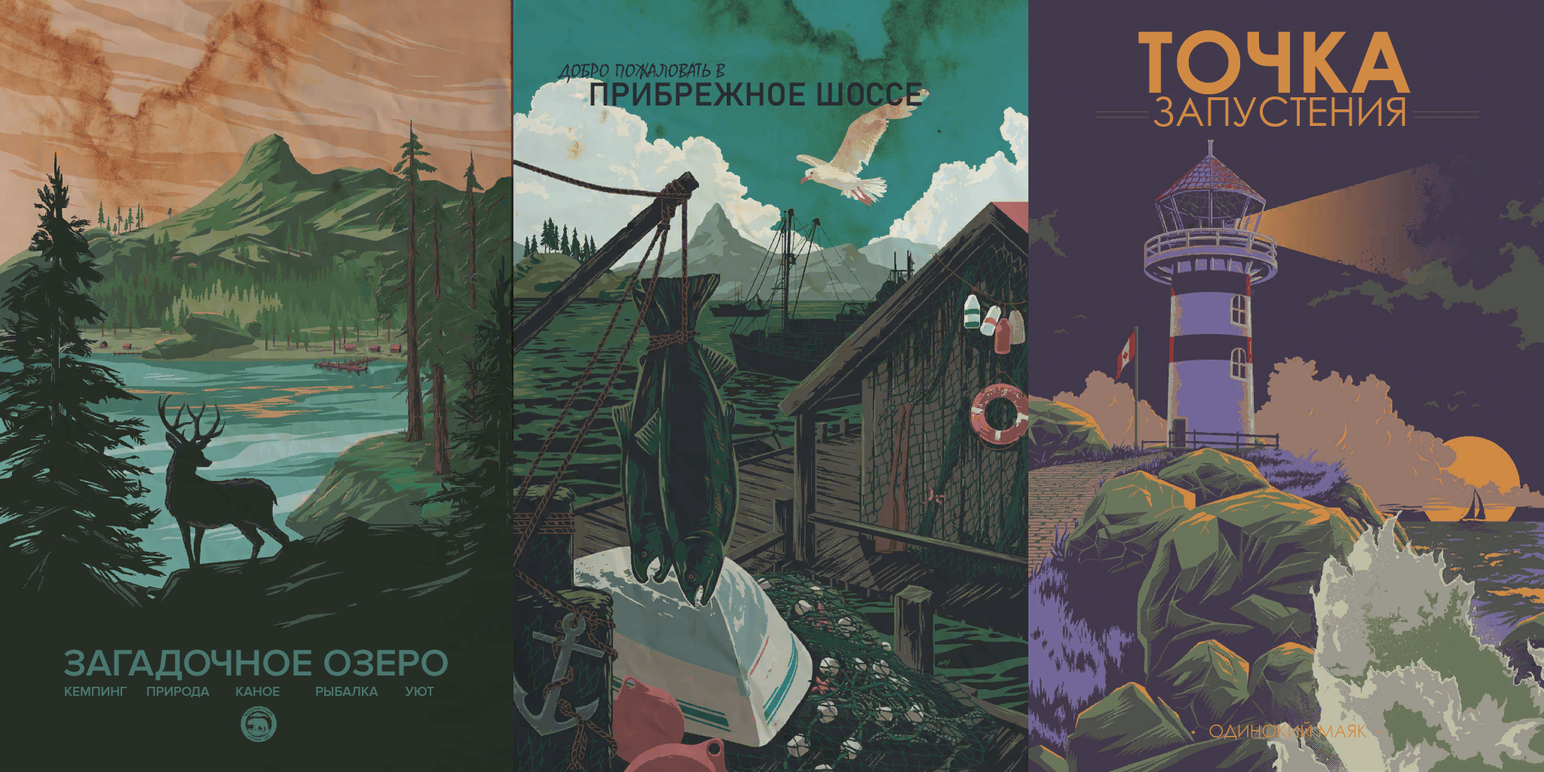
<style>
.page{position:relative;width:1544px;height:772px}
.page>*{position:absolute;margin:0}
.t1{font:84.9px "CenturyGothic-Bold";color:#d18a44;text-transform:uppercase}
.t2{font:19.6px "Mistral";color:#292c31;text-transform:uppercase}
.t3{font:32.3px "Bahnschrift-SemiBold";color:#292c31;text-transform:uppercase}
.t4{font:39.8px "CenturyGothic";color:#d18a44;text-transform:uppercase}
.t5{font:38.3px "ProximaNova-Semibold";color:#4a7870;text-transform:uppercase}
.t6{font:13.3px "ProximaNova-Semibold";color:#4a7870;text-transform:uppercase}
.t7{font:17.4px "CenturyGothic";color:#d18a44;text-transform:uppercase}
</style>
<div class="page">
<p class="t1" style="left:1139px;top:30px;width:272px;height:64px">ТОЧКА</p>
<p class="t2" style="left:557px;top:62px;width:168px;height:22px">добро пожаловать в</p>
<p class="t3" style="left:590px;top:82px;width:332px;height:24px">ПРИБРЕЖНОЕ ШОССЕ</p>
<p class="t4" style="left:1154px;top:97px;width:252px;height:30px">ЗАПУСТЕНИЯ</p>
<p class="t5" style="left:64px;top:649px;width:384px;height:32px">ЗАГАДОЧНОЕ ОЗЕРО</p>
<p class="t6" style="left:65px;top:687px;width:62px;height:9px">кемпинг</p>
<p class="t6" style="left:147px;top:687px;width:63px;height:10px">природа</p>
<p class="t6" style="left:236px;top:687px;width:44px;height:9px">каное</p>
<p class="t6" style="left:316px;top:687px;width:63px;height:9px">рыбалка</p>
<p class="t6" style="left:405px;top:687px;width:29px;height:9px">уют</p>
<p class="t7" style="left:1210px;top:722px;width:157px;height:18px">одинокий маяк</p>
</div>
